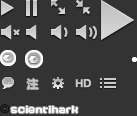
<style>
.page{position:relative;width:137px;height:116px;background:#333333}
.page>*{position:absolute;margin:0}
.t1{font:11px "MicrosoftYaHei";color:#cdcdcd}
.t2{font:10px "AxaxaxRg-Bold";color:#ffffff}
</style>
<div class="page">
<p class="t1" style="left:27px;top:78px;width:12px;height:12px">注</p>
<p class="t2" style="left:11px;top:106px;width:67px;height:7px">scientihark</p>
</div>
